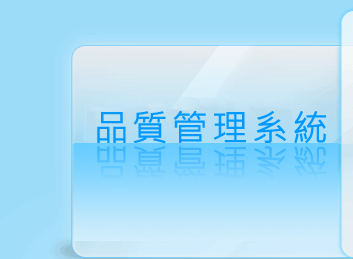
<style>
.page{position:relative;width:353px;height:259px}
.page>*{position:absolute;margin:0}
.t1{font:36px "MicrosoftJhengHeiRegular";letter-spacing:0.2em;color:#0099ff;font-weight:bold}
.t2{font:36px "MicrosoftJhengHeiRegular";letter-spacing:0.2em;font-weight:bold}
</style>
<div class="page">
<p class="t1" style="left:97px;top:110px;width:229px;height:34px">品質管理系統</p>
<p class="t2" style="left:97px;top:146px;width:229px;height:33px">品質管理系統</p>
</div>
